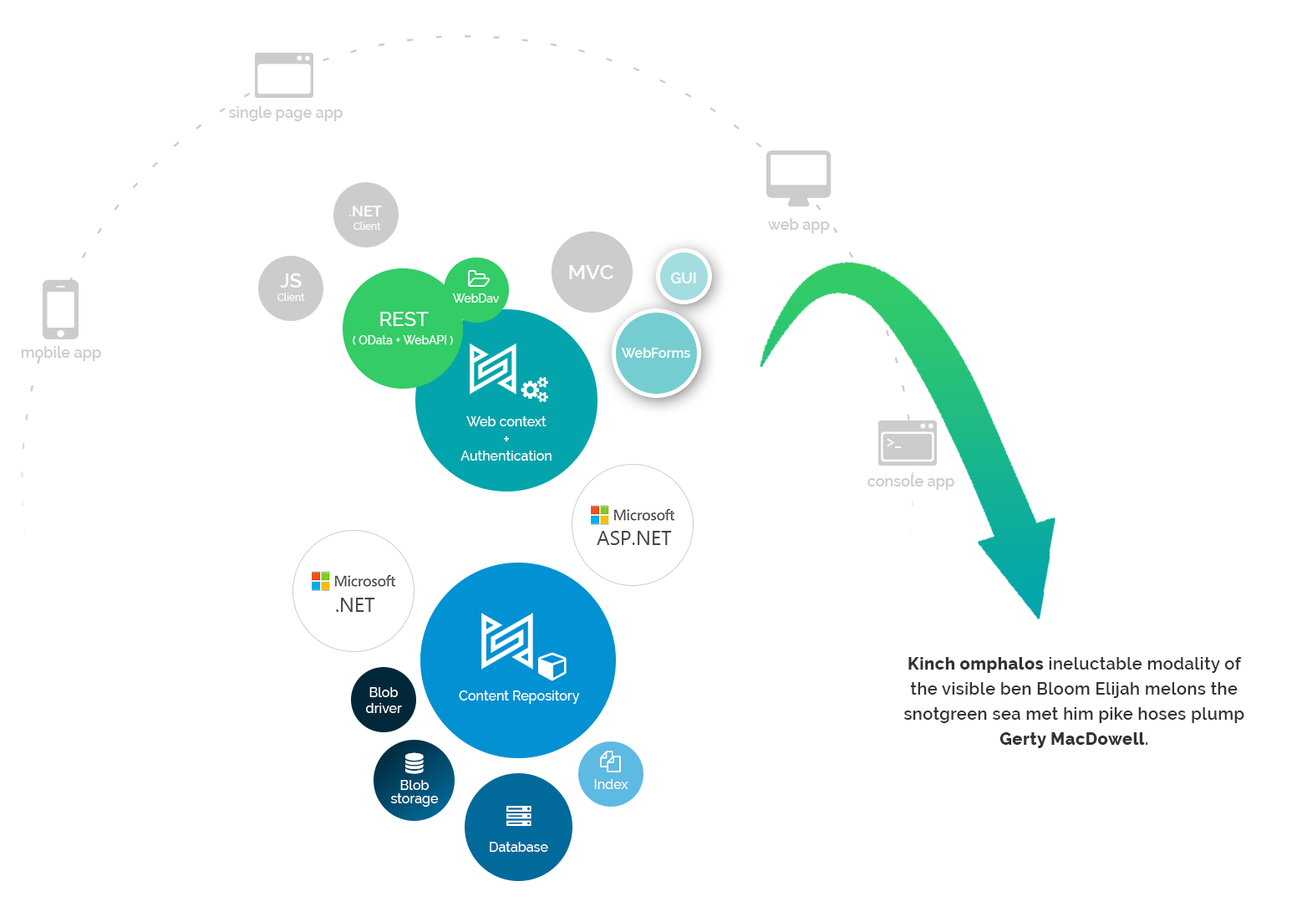
<style>
.page{position:relative;width:1307px;height:912px;background:#ffffff}
.page>*{position:absolute;margin:0}
.t1{font:15px "Raleway-SemiBold";color:#cccccc}
.t2{font:10px/13.4px "Raleway-Medium";color:#ffffff}
.t3{font:15px/13.4px "Raleway-SemiBold";color:#ffffff}
.t4{font:20.9px "Raleway-SemiBold";color:#ffffff}
.t5{font:20.1px/13.4px "Raleway-SemiBold";color:#ffffff}
.t6{font:15px "Raleway-SemiBold";color:#ffffff}
.t7{font:11.7px "Raleway-Medium";color:#ffffff}
.t8{font:20.1px "Raleway-Medium";color:#ffffff}
.t9{font:13.4px "Raleway-SemiBold";color:#ffffff}
.t10{font:13.4px "Raleway-Medium";color:#ffffff}
.t11{font:15px "Raleway-Medium";color:#ffffff}
.t12{font:20.1px "SegoeUI";color:#444444}
.t13{font:16.7px/25.1px "Raleway-SemiBold";letter-spacing:0.025em;color:#333333}
.t14{font:16.7px/25.1px "Raleway-ExtraBold";letter-spacing:0.025em;color:#333333}
.t15{font:13.4px/13.4px "Raleway-Medium";color:#ffffff}
</style>
<div class="page">
<p class="t1" style="left:229px;top:106px;width:114px;height:15px">single page app</p>
<p class="t2" style="left:349px;top:206px;width:33px;height:24px;text-align:center"><span class="t3">.NET <br></span>Client</p>
<p class="t1" style="left:768px;top:218px;width:62px;height:15px">web app</p>
<p class="t4" style="left:569px;top:265px;width:45px;height:14px">MVC</p>
<p class="t2" style="left:278px;top:273px;width:27px;height:28px;text-align:center"><span class="t5">JS<br></span>Client</p>
<p class="t6" style="left:670px;top:273px;width:26px;height:10px">GUI</p>
<p class="t7" style="left:452px;top:293px;width:48px;height:10px">WebDav</p>
<p class="t8" style="left:380px;top:312px;width:49px;height:14px">REST</p>
<p class="t7" style="left:353px;top:335px;width:100px;height:10px">( OData + WebAPI )</p>
<p class="t1" style="left:21px;top:346px;width:80px;height:15px">mobile app</p>
<p class="t9" style="left:621px;top:348px;width:70px;height:10px">WebForms</p>
<p class="t10" style="left:461px;top:416px;width:91px;height:45px;text-align:center">Web context<br><span class="t11">+<br></span>Authentication</p>
<p class="t6" style="left:887px;top:438px;width:15px;height:10px">&gt;_</p>
<p class="t1" style="left:868px;top:475px;width:87px;height:15px">console app</p>
<p class="t12" style="left:597px;top:531px;width:75px;height:14px">ASP.NET</p>
<p class="t12" style="left:336px;top:598px;width:39px;height:14px">.NET</p>
<p class="t13" style="left:905px;top:657px;width:340px;height:91px;text-align:center"><span class="t14">Kinch omphalos</span> ineluctable modality of the visible ben Bloom Elijah melons the snotgreen sea met him pike hoses plump <span class="t14">Gerty MacDowell</span>.</p>
<p class="t10" style="left:366px;top:687px;width:36px;height:26px;text-align:center">Blob<br>driver</p>
<p class="t10" style="left:459px;top:691px;width:121px;height:13px">Content Repository</p>
<p class="t15" style="left:390px;top:780px;width:49px;height:27px;text-align:center">Blob storage</p>
<p class="t10" style="left:594px;top:779px;width:35px;height:10px">Index</p>
<p class="t10" style="left:490px;top:842px;width:58px;height:10px">Database</p>
</div>
